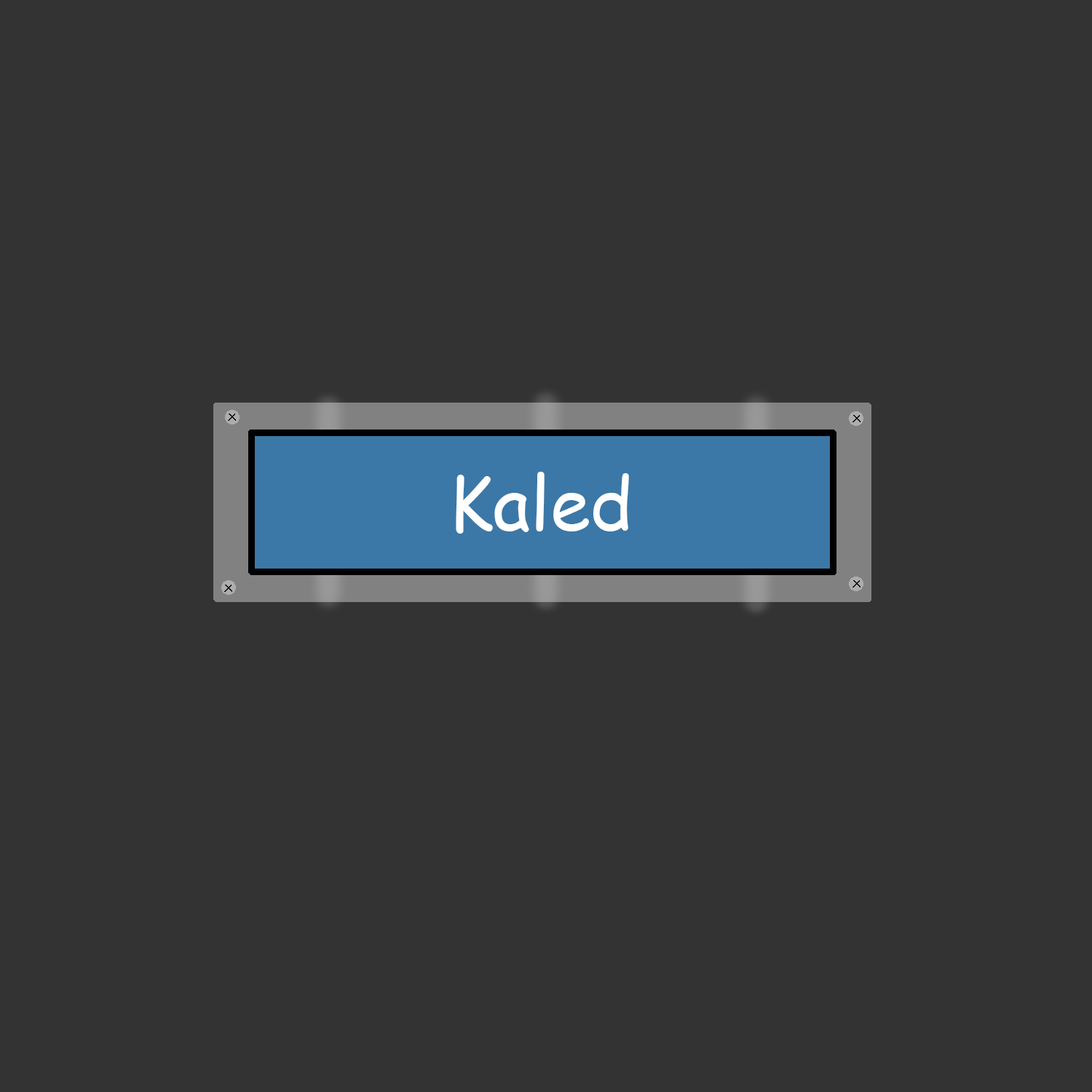
<style>
.page{position:relative;width:1092px;height:1092px;background:#333333}
.page>*{position:absolute;margin:0}
.t1{font:72.8px "ComicSansMS";color:#ffffff}
</style>
<div class="page">
<p class="t1" style="left:456px;top:472px;width:173px;height:62px">Kaled</p>
</div>
